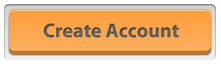
<style>
.page{position:relative;width:221px;height:66px}
.page>*{position:absolute;margin:0}
.t1{font:20px "MyriadPro-Bold";color:#5a5651}
</style>
<div class="page">
<p class="t1" style="left:43px;top:23px;width:136px;height:15px">Create Account</p>
</div>
